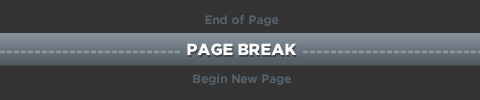
<style>
.page{position:relative;width:480px;height:100px;background:#333333}
.page>*{position:absolute;margin:0}
.t1{font:12px "GothamBold";color:#576169}
.t2{font:16px "GothamBlack";color:#8c949a;text-transform:uppercase}
.t3{font:16px "GothamBlack";color:#ffffff;text-transform:uppercase}
</style>
<div class="page">
<p class="t1" style="left:205px;top:15px;width:74px;height:11px">End of Page</p>
<p class="t2" style="left:0px;top:50px;width:180px;height:4px">--------------------------</p>
<p class="t3" style="left:187px;top:43px;width:110px;height:13px">Page Break</p>
<p class="t1" style="left:193px;top:74px;width:98px;height:11px">Begin New Page</p>
</div>
